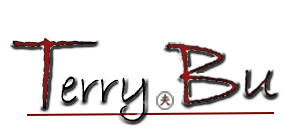
<style>
.page{position:relative;width:290px;height:140px;background:#ffffff}
.page>*{position:absolute;margin:0}
.t1{font:131px "BradleyHandITC"}
.t2{font:52.4px "BradleyHandITC";color:#000000}
</style>
<div class="page">
<p class="t1" style="left:12px;top:38px;width:85px;height:71px">T</p>
<p class="t2" style="left:61px;top:76px;width:85px;height:46px">erry</p>
</div>
